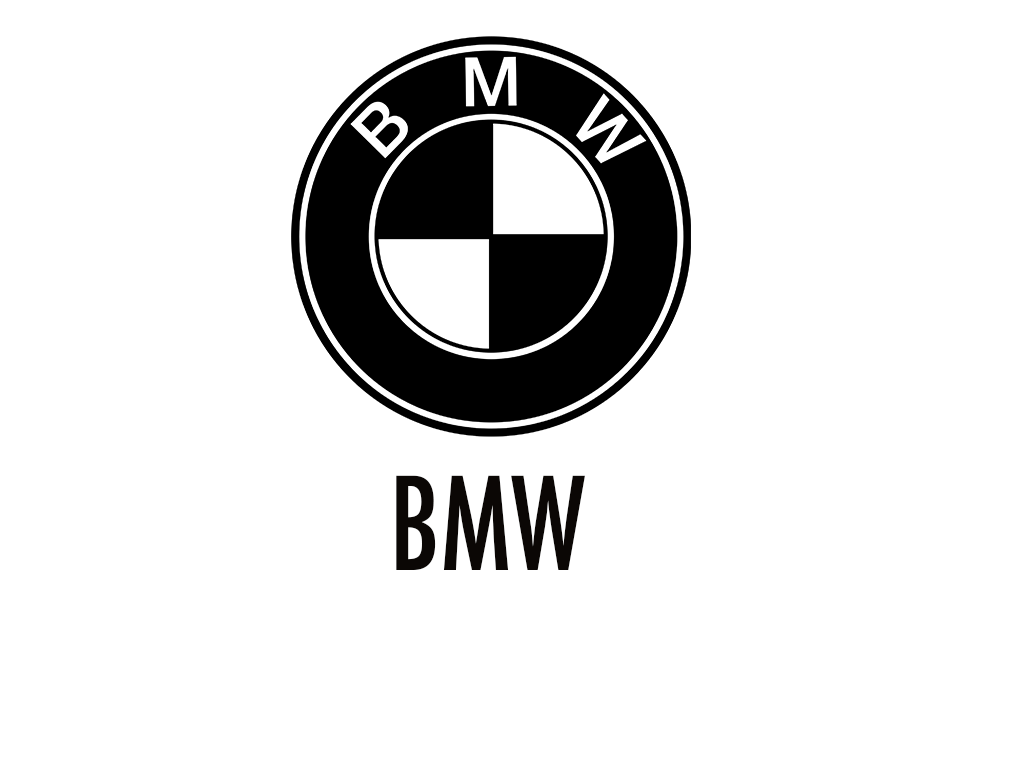
<style>
.page{position:relative;width:1024px;height:768px;background:#ffffff}
.page>*{position:absolute;margin:0}
.t1{font:125px "Futura-CondensedMedium";color:#0b0705}
.t2{font:333.3px "Futura-CondensedMedium";color:#0b0705}
</style>
<div class="page">
<p class="t1" style="left:396px;top:475px;width:189px;height:95px;text-align:center">BMW<br>M<span class="t2">M</span></p>
</div>
